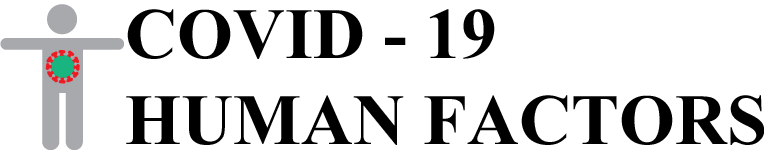
<style>
.page{position:relative;width:764px;height:150px;background:#ffffff}
.page>*{position:absolute;margin:0}
.t1{font:72px "TimesNewRomanPS-BoldMT";color:#000000}
</style>
<div class="page">
<p class="t1" style="left:126px;top:9px;width:639px;height:136px">COVID - 19<br>HUMAN FACTORS</p>
</div>
